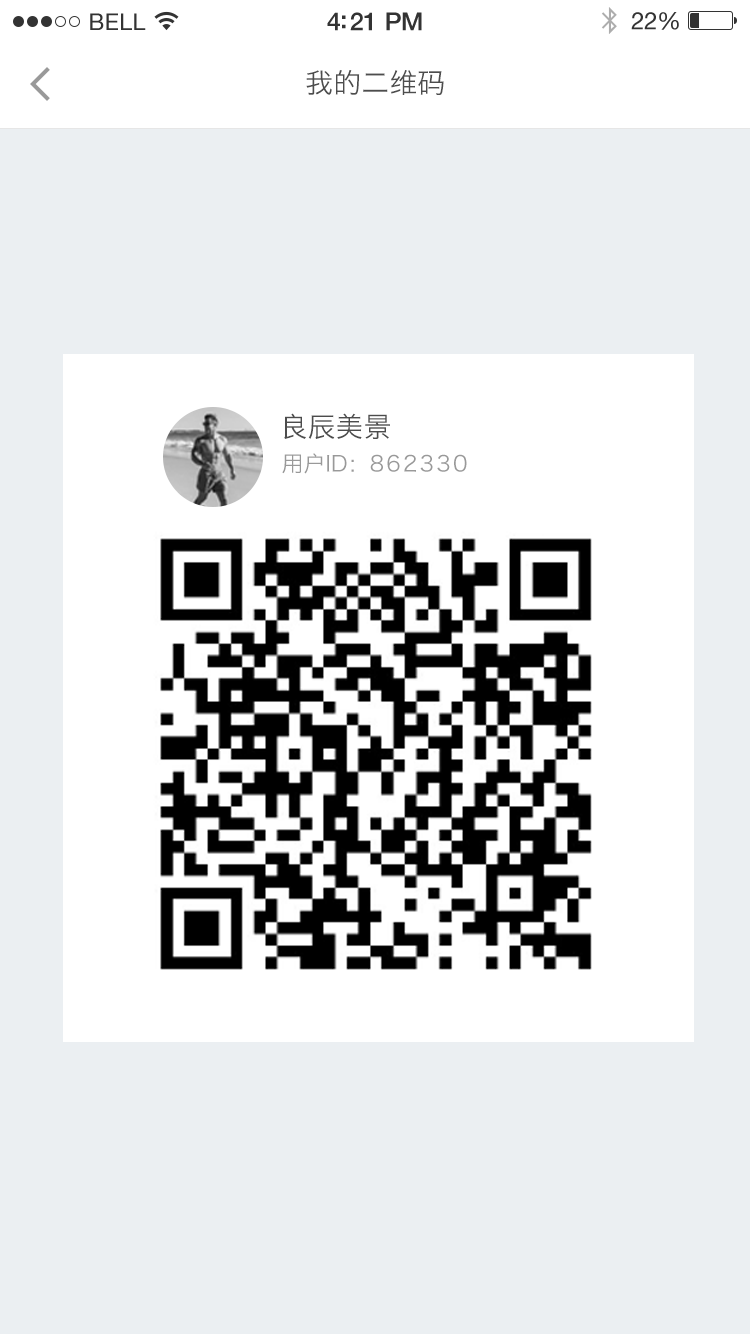
<style>
.page{position:relative;width:750px;height:1334px;background:#ebeff2}
.page>*{position:absolute;margin:0}
.t1{font:28px "HiraginoSansGB-W3";color:#4d4d4d}
.t2{font:28px "HiraginoSansGB-W3";color:#4c4c4c}
.t3{font:22px "HiraginoSansGB-W3";letter-spacing:0.1em;color:#999999}
.t4{font:22px "HiraginoSansGB-W3";color:#999999}
</style>
<div class="page">
<p class="t1" style="left:306px;top:70px;width:138px;height:25px">我的二维码</p>
<p class="t2" style="left:284px;top:413px;width:106px;height:26px">良辰美景</p>
<p class="t3" style="left:282px;top:453px;width:185px;height:21px"><span class="t4">用户ID：</span>862330</p>
</div>
